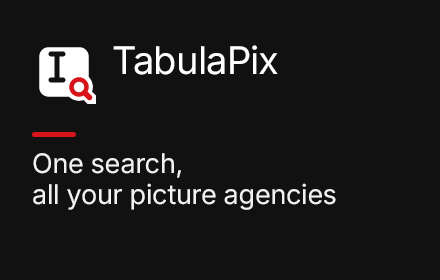
<style>
.page{position:relative;width:440px;height:280px;background:#111111}
.page>*{position:absolute;margin:0}
.t1{font:38px "Inter-ExtraBold";letter-spacing:-0.021em;color:#ffffff}
.t2{font:27px/31.1px "Inter-Bold";letter-spacing:-0.011em;color:#f2f2f2}
</style>
<div class="page">
<p class="t1" style="left:113px;top:45px;width:165px;height:30px">TabulaPix</p>
<p class="t2" style="left:33px;top:153px;width:303px;height:57px">One search,<br>all your picture agencies</p>
</div>
